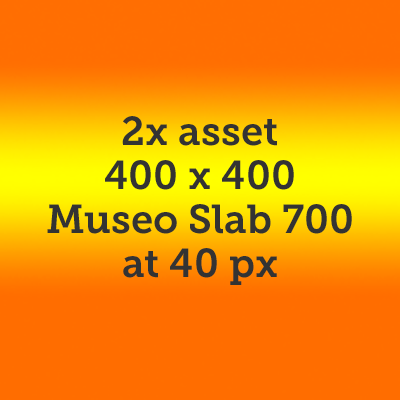
<style>
.page{position:relative;width:400px;height:400px;background:#ff6d00}
.page>*{position:absolute;margin:0}
.t1{font:40px/44px "MuseoSlab-700";color:#333333}
</style>
<div class="page">
<p class="t1" style="left:47px;top:116px;width:305px;height:169px;text-align:center">2x asset<br>400 x 400<br>Museo Slab 700<br>at 40 px</p>
</div>
